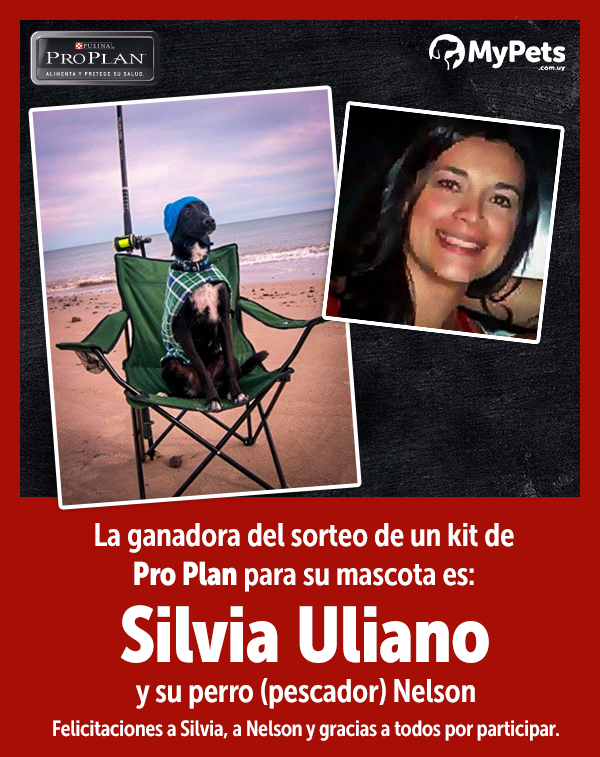
<style>
.page{position:relative;width:600px;height:757px;background:#a70e06}
.page>*{position:absolute;margin:0}
.t1{font:32.5px "MuseoSansCond-700";letter-spacing:-0.01em;color:#ffffff}
.t2{font:32.5px "MuseoSansCond-900";letter-spacing:-0.01em;color:#ffffff}
.t3{font:77.9px "MuseoSansCond-900";color:#ffffff}
.t4{font:22px "MuseoSansCond-700";letter-spacing:-0.01em;color:#ffffff}
</style>
<div class="page">
<p class="t1" style="left:95px;top:523px;width:419px;height:69px;text-align:center">La ganadora del sorteo de un kit de<br><span class="t2">Pro Plan </span>para su mascota es:</p>
<p class="t3" style="left:120px;top:605px;width:369px;height:58px">Silvia Uliano</p>
<p class="t1" style="left:136px;top:678px;width:339px;height:31px">y su perro (pescador) Nelson</p>
<p class="t4" style="left:53px;top:720px;width:506px;height:21px">Felicitaciones a Silvia, a Nelson y gracias a todos por participar.</p>
</div>
